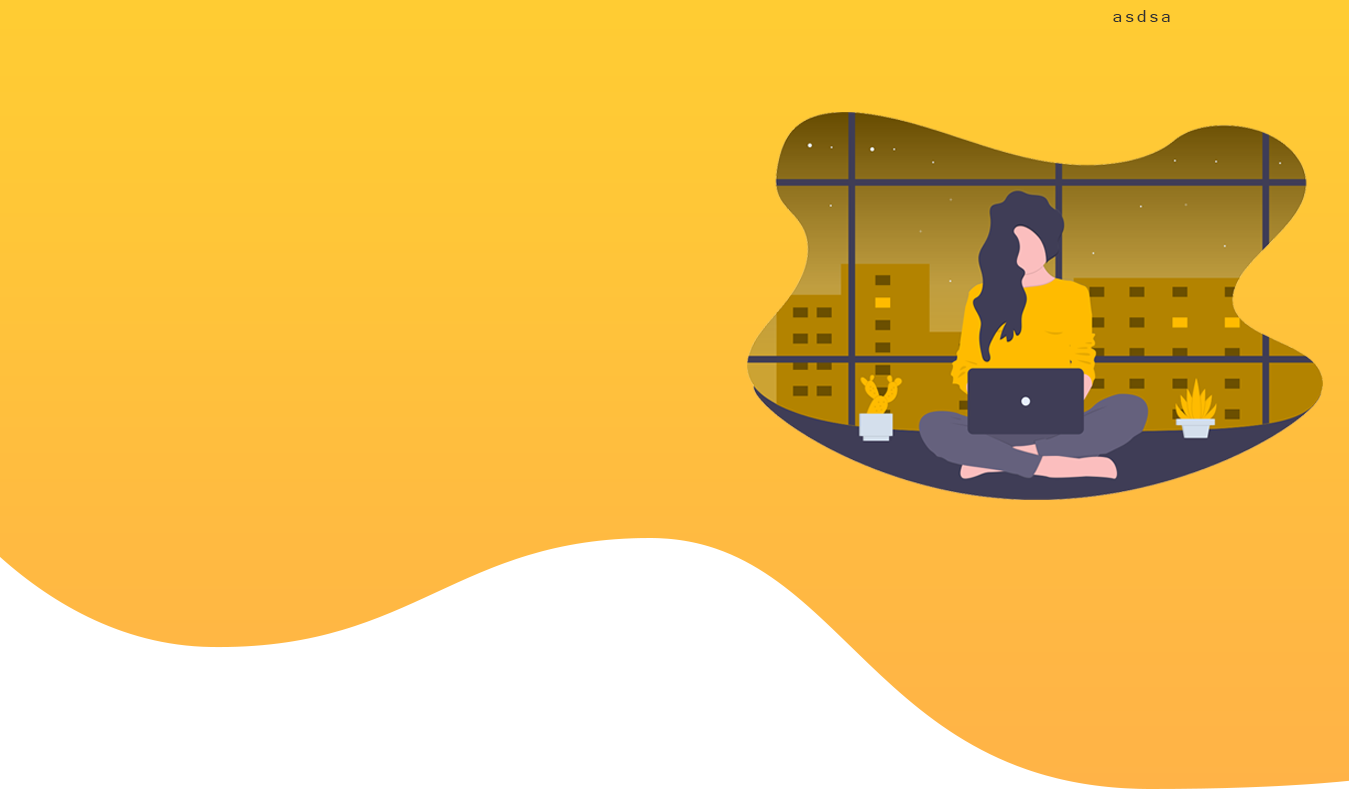
<style>
.page{position:relative;width:1349px;height:802px}
.page>*{position:absolute;margin:0}
.t1{font:16.7px "MicrosoftSansSerif";letter-spacing:0.2em;color:#333333}
</style>
<div class="page">
<p class="t1" style="left:1113px;top:10px;width:57px;height:12px">asdsa</p>
</div>
